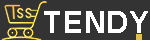
<style>
.page{position:relative;width:150px;height:40px;background:#333333}
.page>*{position:absolute;margin:0}
.t1{font:30px "Arial-BoldMT";color:#ffffff;text-transform:uppercase}
</style>
<div class="page">
<p class="t1" style="left:44px;top:11px;width:104px;height:22px">tendy</p>
</div>
